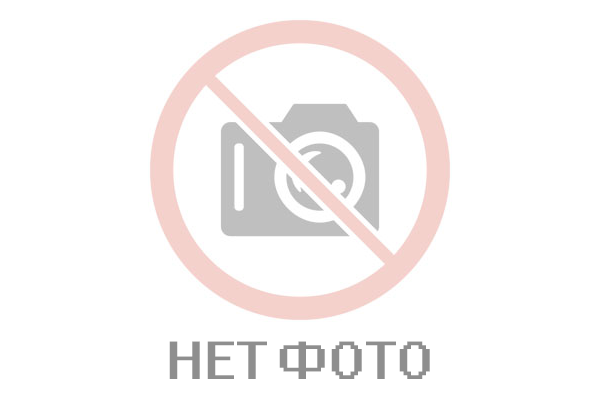
<style>
.page{position:relative;width:600px;height:400px;background:#ffffff}
.page>*{position:absolute;margin:0}
.t1{font:48px "System";color:#8e8e8e}
</style>
<div class="page">
<p class="t1" style="left:169px;top:341px;width:261px;height:38px">НЕТ ФОТО</p>
</div>
